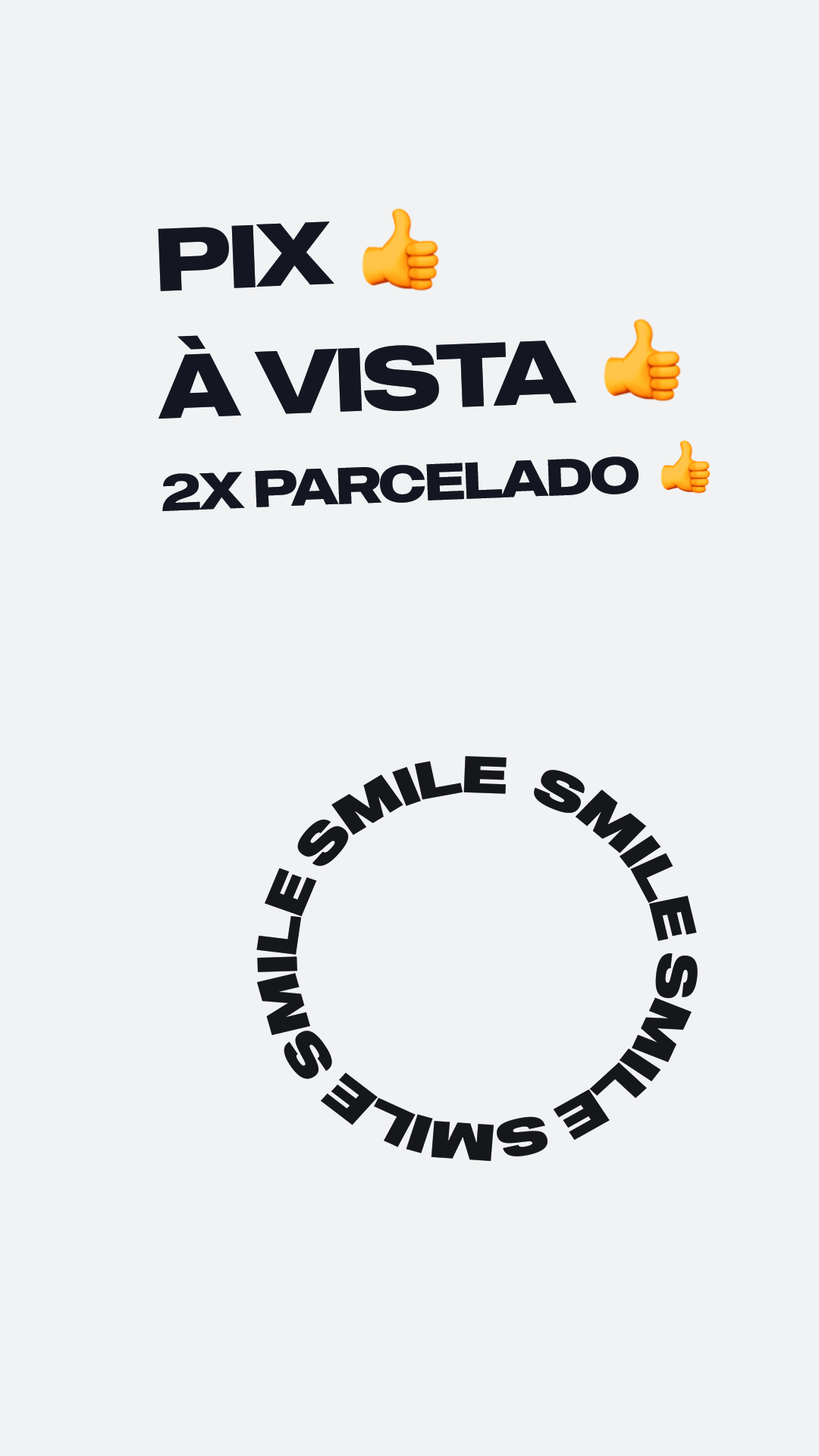
<style>
.page{position:relative;width:819px;height:1456px;background:#f1f2f3}
.page>*{position:absolute;margin:0}
.t1{font:88.8px "MADEOuterSans-Bold";letter-spacing:-0.04em;color:#141621}
.t2{font:89.9px "MADEOuterSans-Bold";letter-spacing:-0.04em;color:#141621}
.t3{font:51.6px "MADEOuterSans-Bold";letter-spacing:-0.04em;color:#141621}
</style>
<div class="page">
<p class="t1" style="left:158px;top:221px;width:176px;height:70px;rotate:-2deg">PIX</p>
<p class="t2" style="left:158px;top:335px;width:419px;height:84px;rotate:-2deg">À VISTA</p>
<p class="t3" style="left:162px;top:457px;width:477px;height:54px;rotate:-2deg">2X PARCELADO</p>
</div>
